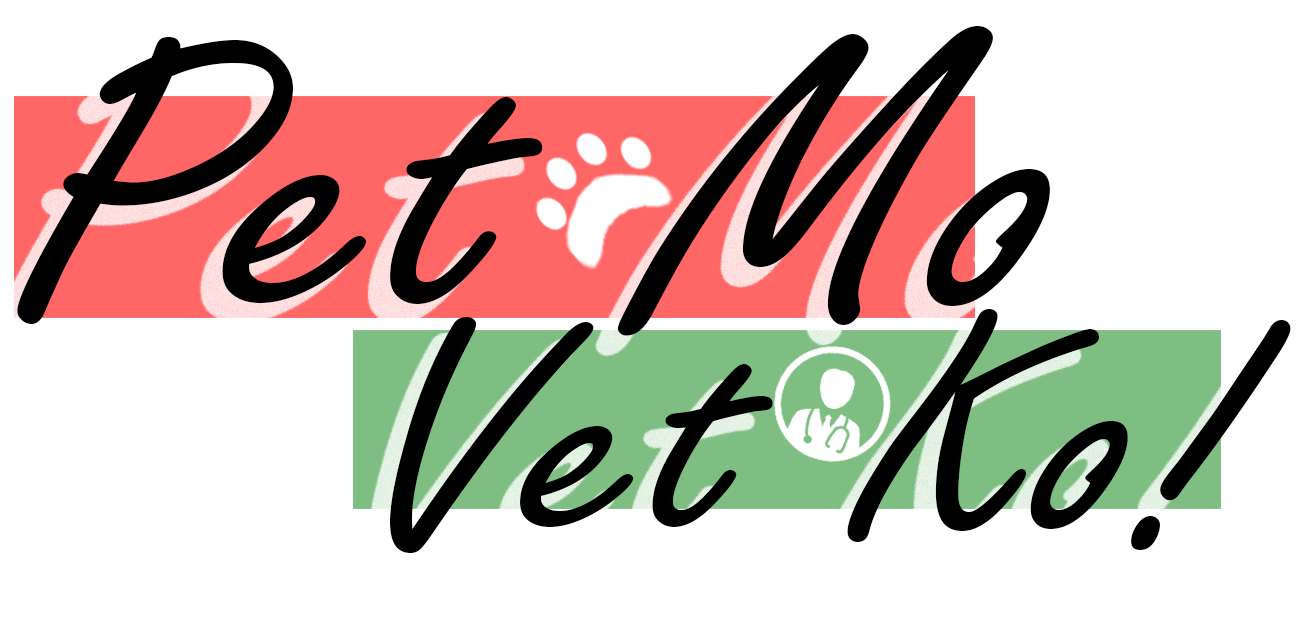
<style>
.page{position:relative;width:1301px;height:623px;background:#ffffff}
.page>*{position:absolute;margin:0}
.t1{font:168.4px "FreestyleScript-Regular";color:#000000;scale:1.22 1}
.t2{font:132.7px "FreestyleScript-Regular";color:#000000;scale:1.22 1}
</style>
<div class="page">
<p class="t1" style="left:17px;top:26px;width:1033px;height:310px">Pet Mo</p>
<p class="t2" style="left:390px;top:309px;width:901px;height:244px">Vet Ko!</p>
</div>
